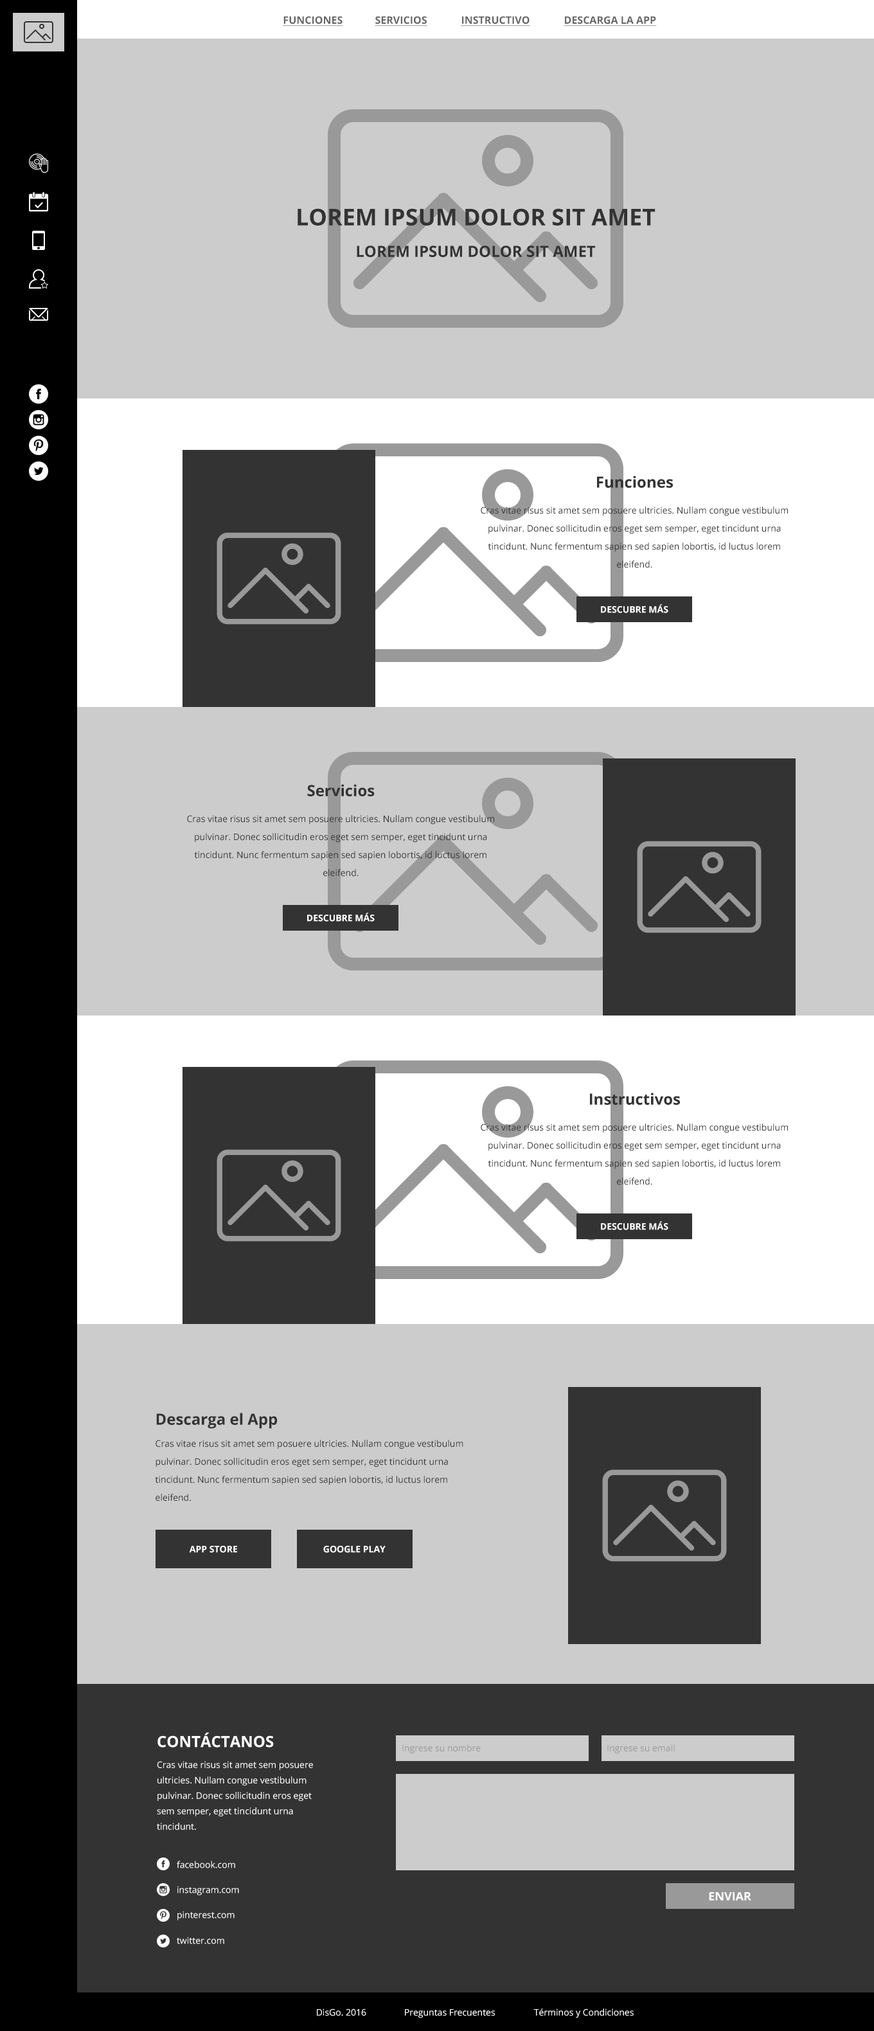
<style>
.page{position:relative;width:874px;height:2031px;background:#cccccc}
.page>*{position:absolute;margin:0}
.t1{font:10.3px "OpenSans-Bold";color:#666666;text-transform:uppercase;text-decoration:underline}
.t2{font:23.1px "OpenSans-Bold";color:#333333;text-transform:uppercase}
.t3{font:15.4px "OpenSans-Bold";color:#333333;text-transform:uppercase}
.t4{font:15.4px "OpenSans-Bold";color:#333333}
.t5{font:9px/18px "OpenSans";color:#333333}
.t6{font:9px "OpenSans-Bold";color:#ffffff;text-transform:uppercase}
.t7{font:15.4px "OpenSans-Bold";color:#ffffff}
.t8{font:9px "OpenSans";color:#999999}
.t9{font:9px/15.4px "OpenSans";color:#ffffff}
.t10{font:9px "OpenSans";color:#ffffff}
.t11{font:11.6px "OpenSans-Bold";color:#ffffff;text-transform:uppercase}
</style>
<div class="page">
<p class="t1" style="left:283px;top:16px;width:60px;height:10px">Funciones</p>
<p class="t1" style="left:375px;top:16px;width:52px;height:10px">Servicios</p>
<p class="t1" style="left:461px;top:16px;width:69px;height:10px">Instructivo</p>
<p class="t1" style="left:564px;top:16px;width:93px;height:10px">Descarga la app</p>
<p class="t2" style="left:298px;top:208px;width:358px;height:18px">Lorem ipsum dolor sit amet</p>
<p class="t3" style="left:357px;top:246px;width:239px;height:11px">Lorem ipsum dolor sit amet</p>
<p class="t4" style="left:597px;top:476px;width:76px;height:12px">Funciones</p>
<p class="t5" style="left:481px;top:506px;width:307px;height:62px;text-align:center">Cras vitae risus sit amet sem posuere ultricies. Nullam congue vestibulum pulvinar. Donec sollicitudin eros eget sem semper, eget tincidunt urna tincidunt. Nunc fermentum sapien sed sapien lobortis, id luctus lorem eleifend.</p>
<p class="t6" style="left:601px;top:604px;width:67px;height:9px">Descubre Más</p>
<p class="t4" style="left:307px;top:784px;width:68px;height:12px">Servicios</p>
<p class="t5" style="left:187px;top:815px;width:307px;height:62px;text-align:center">Cras vitae risus sit amet sem posuere ultricies. Nullam congue vestibulum pulvinar. Donec sollicitudin eros eget sem semper, eget tincidunt urna tincidunt. Nunc fermentum sapien sed sapien lobortis, id luctus lorem eleifend.</p>
<p class="t6" style="left:307px;top:913px;width:68px;height:9px">Descubre Más</p>
<p class="t4" style="left:590px;top:1093px;width:90px;height:12px">Instructivos</p>
<p class="t5" style="left:481px;top:1124px;width:307px;height:61px;text-align:center">Cras vitae risus sit amet sem posuere ultricies. Nullam congue vestibulum pulvinar. Donec sollicitudin eros eget sem semper, eget tincidunt urna tincidunt. Nunc fermentum sapien sed sapien lobortis, id luctus lorem eleifend.</p>
<p class="t6" style="left:601px;top:1221px;width:67px;height:9px">Descubre Más</p>
<p class="t4" style="left:156px;top:1413px;width:122px;height:16px">Descarga el App</p>
<p class="t5" style="left:155px;top:1440px;width:308px;height:61px">Cras vitae risus sit amet sem posuere ultricies. Nullam congue vestibulum pulvinar. Donec sollicitudin eros eget sem semper, eget tincidunt urna tincidunt. Nunc fermentum sapien sed sapien lobortis, id luctus lorem eleifend.</p>
<p class="t6" style="left:189px;top:1546px;width:48px;height:7px">App Store</p>
<p class="t6" style="left:323px;top:1546px;width:63px;height:7px">Google Play</p>
<p class="t7" style="left:157px;top:1732px;width:117px;height:16px">CONTÁCTANOS</p>
<p class="t8" style="left:402px;top:1744px;width:79px;height:9px">Ingrese su nombre</p>
<p class="t8" style="left:607px;top:1744px;width:68px;height:9px">Ingrese su email</p>
<p class="t9" style="left:157px;top:1761px;width:156px;height:69px">Cras vitae risus sit amet sem posuere ultricies. Nullam congue vestibulum pulvinar. Donec sollicitudin eros eget sem semper, eget tincidunt urna tincidunt.</p>
<p class="t10" style="left:177px;top:1861px;width:58px;height:7px">facebook.com</p>
<p class="t10" style="left:177px;top:1886px;width:62px;height:9px">instagram.com</p>
<p class="t11" style="left:709px;top:1892px;width:42px;height:9px">Enviar</p>
<p class="t10" style="left:177px;top:1912px;width:58px;height:9px">pinterest.com</p>
<p class="t10" style="left:177px;top:1937px;width:47px;height:7px">twitter.com</p>
<p class="t10" style="left:317px;top:2009px;width:49px;height:7px">DisGo. 2016</p>
<p class="t10" style="left:405px;top:2009px;width:90px;height:9px">Preguntas Frecuentes</p>
<p class="t10" style="left:533px;top:2009px;width:101px;height:9px">Términos y Condiciones</p>
</div>
